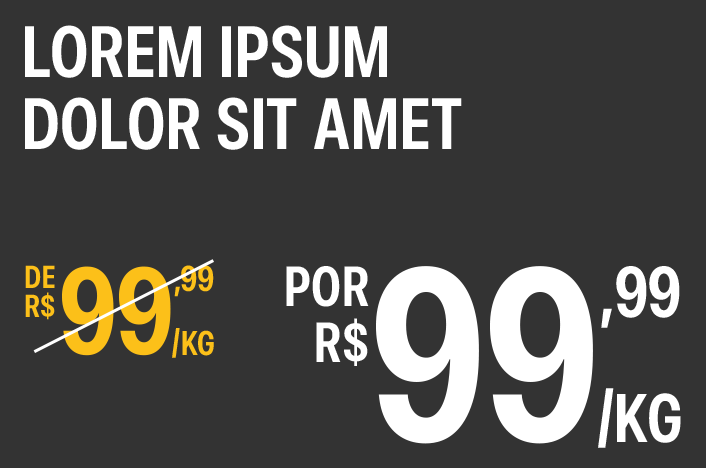
<style>
.page{position:relative;width:706px;height:468px;background:#333333}
.page>*{position:absolute;margin:0}
.t1{font:72px/72px "SFPro-CondensedSemibold";letter-spacing:0.02em;color:#ffffff;text-transform:uppercase}
.t2{font:31.6px/29.2px "SFPro-CondensedSemibold";letter-spacing:0.02em;color:#fcc019;text-transform:uppercase}
.t3{font:122.4px "SFPro-CondensedSemibold";letter-spacing:-0.02em;color:#fcc019;text-transform:uppercase}
.t4{font:61.2px "SFPro-CondensedSemibold";letter-spacing:-0.02em;color:#fcc019}
.t5{font:56px/56px "SFPro-CondensedSemibold";letter-spacing:0.02em;color:#ffffff;text-transform:uppercase}
.t6{font:244.8px "SFPro-CondensedSemibold";letter-spacing:-0.02em;color:#ffffff;text-transform:uppercase}
.t7{font:122.4px "SFPro-CondensedSemibold";letter-spacing:-0.02em;color:#ffffff}
.t8{font:34px "SFPro-CondensedSemibold";letter-spacing:0.02em;color:#fcc019;text-transform:uppercase}
.t9{font:68px "SFPro-CondensedSemibold";letter-spacing:0.02em;color:#ffffff;text-transform:uppercase}
</style>
<div class="page">
<p class="t1" style="left:25px;top:25px;width:437px;height:125px">Lorem ipsum<br>dolor sit amet</p>
<p class="t2" style="left:25px;top:265px;width:30px;height:55px;text-align:right">DE<br>R$</p>
<p class="t3" style="left:62px;top:266px;width:109px;height:90px">99</p>
<p class="t4" style="left:174px;top:265px;width:40px;height:32px">,99</p>
<p class="t5" style="left:286px;top:266px;width:83px;height:100px;text-align:right">POR<br>R$</p>
<p class="t6" style="left:376px;top:266px;width:217px;height:178px">99</p>
<p class="t7" style="left:601px;top:266px;width:79px;height:62px">,99</p>
<p class="t8" style="left:172px;top:328px;width:42px;height:30px">/KG</p>
<p class="t9" style="left:598px;top:388px;width:83px;height:60px">/KG</p>
</div>
